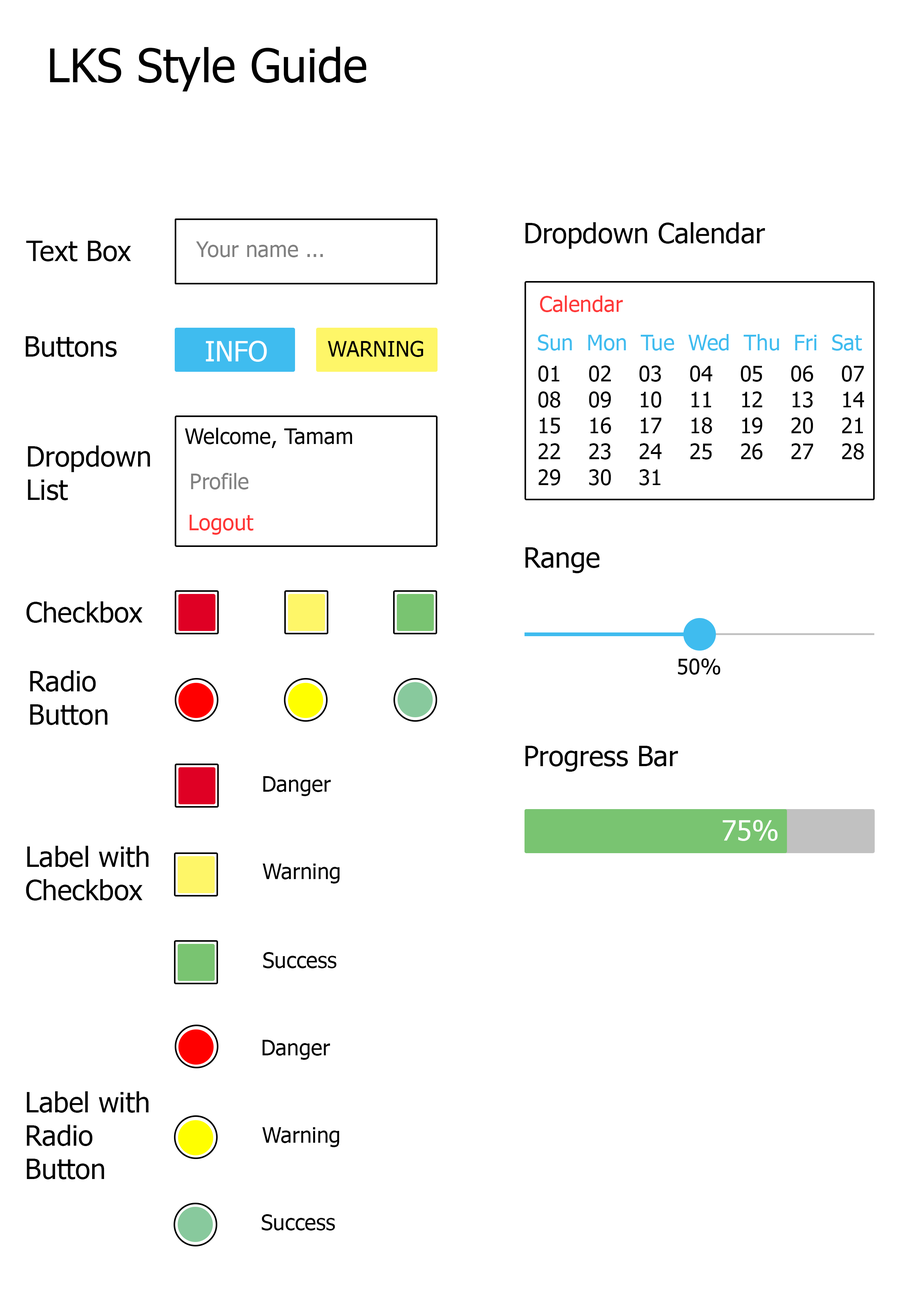
<style>
.page{position:relative;width:918px;height:1299px;background:#ffffff}
.page>*{position:absolute;margin:0}
.t1{font:46.3px "Tahoma";color:#000000}
.t2{font:27.8px "Tahoma";color:#000000}
.t3{font:21.6px "Tahoma";color:#808080}
.t4{font:21.6px "Tahoma";color:#ff3939}
.t5{font:27.8px "Tahoma";color:#ffffff}
.t6{font:21.6px "Tahoma";color:#000000}
.t7{font:21.6px "Tahoma";color:#3fbcef}
.t8{font:21.6px "Tahoma";color:#818181}
.t9{font:21.6px "Tahoma";color:#ff3636}
</style>
<div class="page">
<p class="t1" style="left:50px;top:47px;width:317px;height:44px">LKS Style Guide</p>
<p class="t2" style="left:525px;top:222px;width:240px;height:27px">Dropdown Calendar</p>
<p class="t2" style="left:26px;top:241px;width:105px;height:20px">Text Box</p>
<p class="t3" style="left:196px;top:241px;width:127px;height:16px">Your name ...</p>
<p class="t4" style="left:540px;top:295px;width:83px;height:17px">Calendar</p>
<p class="t2" style="left:26px;top:336px;width:91px;height:21px">Buttons</p>
<p class="t5" style="left:206px;top:341px;width:61px;height:21px">INFO</p>
<p class="t6" style="left:328px;top:341px;width:95px;height:16px">WARNING</p>
<p class="t7" style="left:538px;top:334px;width:324px;height:17px">Sun  Mon  Tue  Wed  Thu  Fri  Sat</p>
<p class="t6" style="left:538px;top:365px;width:326px;height:120px">01    02    03    04    05    06    07<br>08    09    10    11    12    13    14<br>15    16    17    18    19    20    21<br>22    23    24    25    26    27    28<br>29    30    31</p>
<p class="t6" style="left:185px;top:428px;width:167px;height:20px">Welcome, Tamam</p>
<p class="t2" style="left:28px;top:445px;width:122px;height:55px">Dropdown<br>List</p>
<p class="t8" style="left:191px;top:473px;width:57px;height:16px">Profile</p>
<p class="t9" style="left:190px;top:515px;width:64px;height:20px">Logout</p>
<p class="t2" style="left:525px;top:547px;width:75px;height:26px">Range</p>
<p class="t2" style="left:26px;top:601px;width:117px;height:22px">Checkbox</p>
<p class="t6" style="left:678px;top:658px;width:42px;height:17px">50%</p>
<p class="t2" style="left:30px;top:670px;width:78px;height:55px">Radio<br>Button</p>
<p class="t2" style="left:525px;top:746px;width:153px;height:26px">Progress Bar</p>
<p class="t6" style="left:263px;top:776px;width:68px;height:20px">Danger</p>
<p class="t5" style="left:723px;top:820px;width:55px;height:21px">75%</p>
<p class="t2" style="left:26px;top:846px;width:123px;height:54px">Label with<br>Checkbox</p>
<p class="t6" style="left:262px;top:863px;width:78px;height:20px">Warning</p>
<p class="t6" style="left:263px;top:952px;width:74px;height:16px">Success</p>
<p class="t6" style="left:262px;top:1040px;width:68px;height:20px">Danger</p>
<p class="t2" style="left:27px;top:1091px;width:122px;height:88px">Label with<br>Radio<br>Button</p>
<p class="t6" style="left:262px;top:1127px;width:77px;height:20px">Warning</p>
<p class="t6" style="left:262px;top:1214px;width:73px;height:16px">Success</p>
</div>
